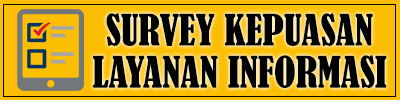
<style>
.page{position:relative;width:400px;height:100px;background:#fbbe03}
.page>*{position:absolute;margin:0}
.t1{font:40px/42px "BernardMT-Condensed";color:#000000}
</style>
<div class="page">
<p class="t1" style="left:92px;top:13px;width:295px;height:75px;text-align:center">SURVEY KEPUASAN<br>LAYANAN INFORMASI</p>
</div>
